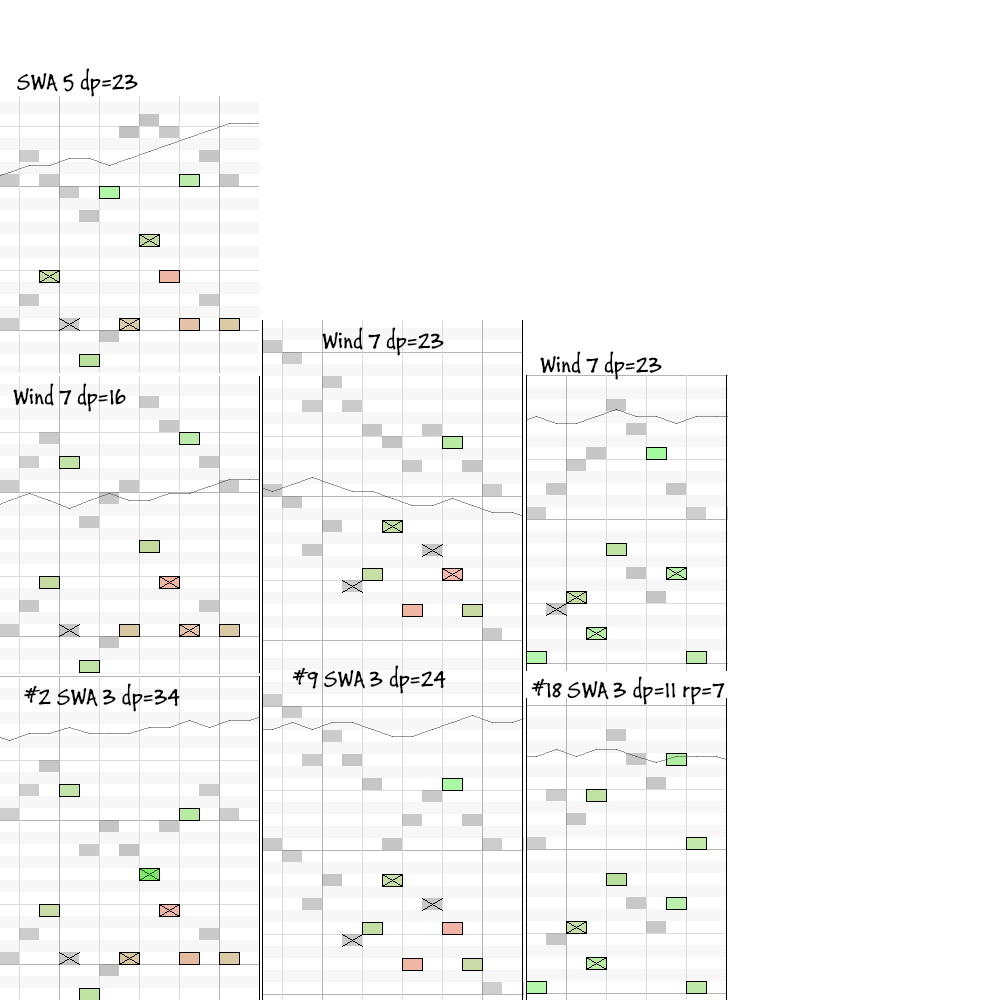
<style>
.page{position:relative;width:1000px;height:1000px;background:#ffffff}
.page>*{position:absolute;margin:0}
.t1{font:24px "BuxtonSketch";color:#000000}
</style>
<div class="page">
<p class="t1" style="left:17px;top:68px;width:121px;height:29px">SWA 5 dp=23</p>
<p class="t1" style="left:322px;top:327px;width:122px;height:29px">Wind 7 dp=23</p>
<p class="t1" style="left:540px;top:351px;width:122px;height:29px">Wind 7 dp=23</p>
<p class="t1" style="left:13px;top:383px;width:113px;height:29px">Wind 7 dp=16</p>
<p class="t1" style="left:292px;top:665px;width:154px;height:29px">#9 SWA 3 dp=24</p>
<p class="t1" style="left:531px;top:676px;width:194px;height:29px">#18 SWA 3 dp=11 rp=7</p>
<p class="t1" style="left:24px;top:683px;width:156px;height:29px">#2 SWA 3 dp=34</p>
</div>
